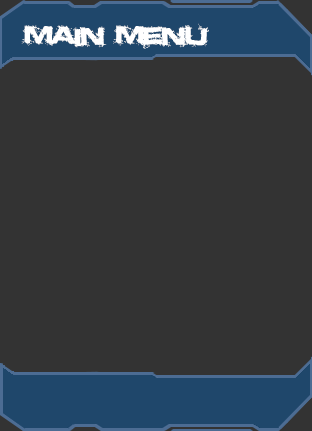
<style>
.page{position:relative;width:312px;height:431px;background:#333333}
.page>*{position:absolute;margin:0}
.t1{font:24px "Defused-ExtendedBold";color:#ffffff}
</style>
<div class="page">
<p class="t1" style="left:21px;top:23px;width:188px;height:26px">main menu</p>
</div>
